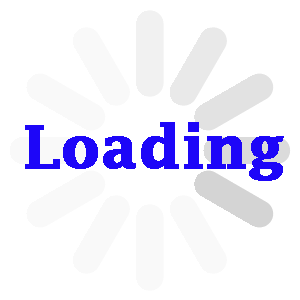
<style>
.page{position:relative;width:300px;height:300px;background:#ffffff}
.page>*{position:absolute;margin:0}
.t1{font:60px "LucidaFax-Demi";color:#1d06f8;font-weight:bold}
</style>
<div class="page">
<p class="t1" style="left:25px;top:122px;width:259px;height:59px">Loading</p>
</div>
